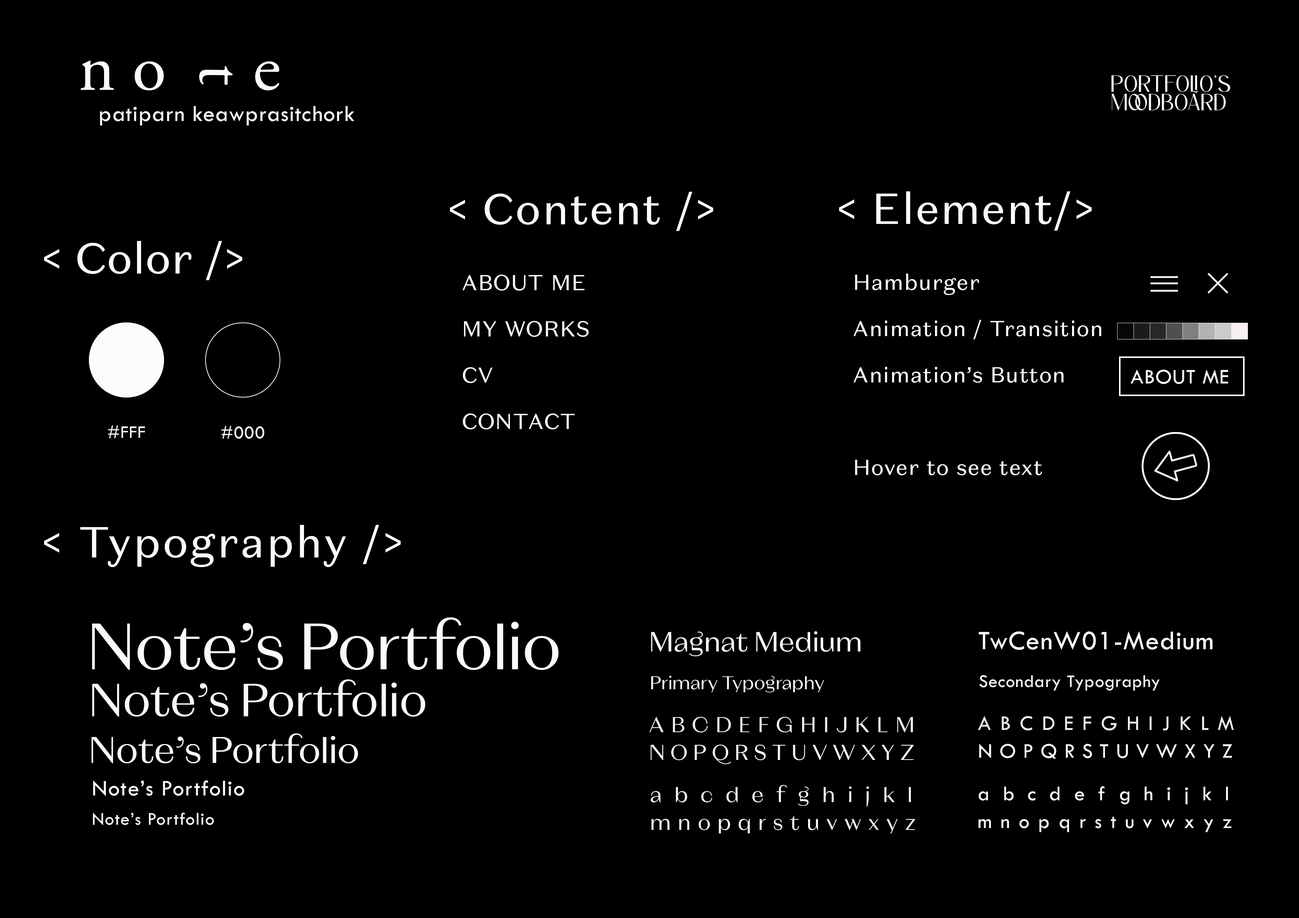
<style>
.page{position:relative;width:1299px;height:918px;background:#000000}
.page>*{position:absolute;margin:0}
.t1{font:69.4px "AGaramondPro-Regular";color:#fdfafa}
.t2{font:23.5px/18.5px "Carlotipersonaluse";letter-spacing:0.022em;color:#fdfafa}
.t3{font:23.7px "TwCenW01-Medium";letter-spacing:0.022em;color:#fdfafa}
.t4{font:43.5px "DomaineSansText-Regular";letter-spacing:0.022em;color:#fdfafa}
.t5{font:43.5px "DomaineSansText-Regular";color:#fdfafa}
.t6{font:21.6px/46.3px "DomaineSansText-Regular";letter-spacing:0.022em;color:#fdfafa}
.t7{font:21.6px "TwCenW01-Medium";letter-spacing:0.022em;color:#fdfafa}
.t8{font:18.5px "TwCenW01-Medium";letter-spacing:0.022em;color:#fdfafa}
.t9{font:43.5px "DomaineSansText-Regular";letter-spacing:0.035em;color:#fdfafa}
.t10{font:65px "Magnat-HeadRegular";letter-spacing:0.015em;color:#fdfafa}
.t11{font:27.8px "Magnat-HeadRegular";letter-spacing:0.022em;color:#fdfafa}
.t12{font:27.8px "TwCenW01-Medium";letter-spacing:0.022em;color:#fdfafa}
.t13{font:18.5px "Magnat-HeadRegular";letter-spacing:0.022em;color:#fdfafa}
.t14{font:46.4px "Magnat-HeadRegular";letter-spacing:0.015em;color:#fdfafa}
.t15{font:21.6px/27.8px "Magnat-HeadRegular";letter-spacing:0.07em;color:#f8f0f0}
.t16{font:21.6px/27.8px "Magnat-HeadRegular";letter-spacing:0.035em;color:#fdfafa}
.t17{font:21.6px/27.8px "TwCenW01-Medium";letter-spacing:0.07em;color:#f8f0f0}
.t18{font:21.6px/27.8px "TwCenW01-Medium";letter-spacing:0.022em;color:#fdfafa}
.t19{font:37.1px "Magnat-HeadRegular";letter-spacing:0.015em;color:#fdfafa}
.t20{font:23.2px "TwCenW01-Medium";letter-spacing:0.035em;color:#fdfafa}
.t21{font:21.6px/27.8px "Magnat-HeadRegular";letter-spacing:0.07em;color:#fdfafa}
.t22{font:21.6px/27.8px "Magnat-HeadRegular";letter-spacing:0.2em;color:#fdfafa}
.t23{font:21.6px/27.8px "TwCenW01-Medium";letter-spacing:0.06em;color:#fdfafa}
.t24{font:21.6px/27.8px "TwCenW01-Medium";letter-spacing:0.165em;color:#fdfafa}
.t25{font:18.6px "TwCenW01-Medium";letter-spacing:0.035em;color:#fdfafa}
</style>
<div class="page">
<p class="t1" style="left:81px;top:60px;width:199px;height:31px">n o     e</p>
<p class="t1" style="left:199px;top:66px;width:33px;height:19px;rotate:91deg">t</p>
<p class="t2" style="left:1111px;top:75px;width:119px;height:35px">PoRTFOLIO’s<br>moodboard</p>
<p class="t3" style="left:100px;top:106px;width:254px;height:20px">patiparn keawprasitchork</p>
<p class="t4" style="left:450px;top:192px;width:263px;height:39px">&lt; Content /&gt;</p>
<p class="t4" style="left:839px;top:191px;width:252px;height:40px">&lt; Element/&gt;</p>
<p class="t5" style="left:44px;top:241px;width:198px;height:39px">&lt; Color /&gt;</p>
<p class="t6" style="left:462px;top:275px;width:127px;height:154px">ABOUT ME<br>MY WORKS <br>CV<br>CONTACT</p>
<p class="t6" style="left:853px;top:274px;width:248px;height:201px">Hamburger<br>Animation / Transition<br>Animation’s Button<br><br>Hover to see text</p>
<p class="t7" style="left:1130px;top:369px;width:98px;height:15px">ABOUT ME</p>
<p class="t8" style="left:108px;top:425px;width:37px;height:13px">#FFF</p>
<p class="t8" style="left:221px;top:426px;width:43px;height:13px">#000</p>
<p class="t9" style="left:44px;top:525px;width:357px;height:42px">&lt; Typography /&gt;</p>
<p class="t10" style="left:92px;top:617px;width:467px;height:53px">Note’s Portfolio</p>
<p class="t11" style="left:651px;top:631px;width:209px;height:25px">Magnat Medium</p>
<p class="t12" style="left:978px;top:631px;width:234px;height:19px">TwCenW01-Medium</p>
<p class="t13" style="left:651px;top:676px;width:173px;height:17px">Primary Typography</p>
<p class="t8" style="left:979px;top:675px;width:180px;height:16px">Secondary Typography</p>
<p class="t14" style="left:92px;top:679px;width:333px;height:38px">Note’s Portfolio</p>
<p class="t15" style="left:649px;top:717px;width:265px;height:48px">A B C D E F G H I J K L M <br><span class="t16">N O P Q R S T U V W X Y Z</span></p>
<p class="t17" style="left:978px;top:716px;width:256px;height:43px">A B C D E F G H I J K L M<span class="t18"> <br>N O P Q R S T U V W X Y Z</span></p>
<p class="t19" style="left:91px;top:733px;width:267px;height:30px">Note’s Portfolio</p>
<p class="t20" style="left:93px;top:780px;width:151px;height:16px">Note’s Portfolio</p>
<p class="t21" style="left:650px;top:785px;width:265px;height:49px"><span class="t22">a b c d e f g h i j k l <br></span>m n o p q r s t u v w x y z</p>
<p class="t23" style="left:978px;top:786px;width:253px;height:46px"><span class="t24">a b c d e f g h i j k l <br></span>m n o p q r s t u v w x y z</p>
<p class="t25" style="left:93px;top:813px;width:121px;height:13px">Note’s Portfolio</p>
</div>
